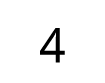
<style>
.page{position:relative;width:105px;height:83px;background:#ffffff}
.page>*{position:absolute;margin:0}
.t1{font:47.9px "DroidSans";color:#000000}
</style>
<div class="page">
<p class="t1" style="left:40px;top:28px;width:25px;height:35px">4</p>
</div>
